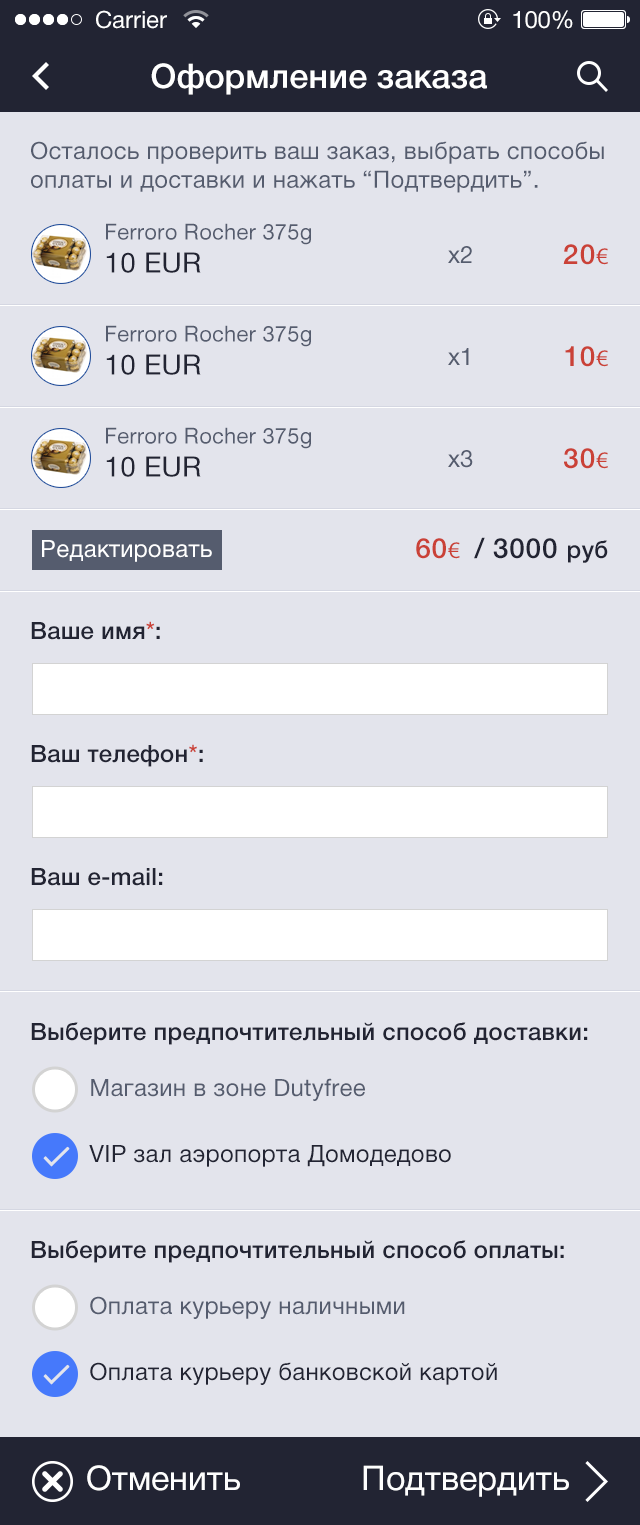
<style>
.page{position:relative;width:640px;height:1525px;background:#e3e4ec}
.page>*{position:absolute;margin:0}
.t1{font:24px "HelveticaNeueCyr-Roman";color:#ffffff}
.t2{font:34px "HelveticaNeueCyr-Medium";color:#ffffff}
.t3{font:24px "HelveticaNeueCyr-Roman";letter-spacing:0.01em;color:#555c6e}
.t4{font:22px "HelveticaNeueCyr-Roman";letter-spacing:0.01em;color:#555c6e}
.t5{font:28px/33px "HelveticaNeueCyr-Roman";letter-spacing:0.01em;color:#222433}
.t6{font:28px "HelveticaNeueCyr-Medium";letter-spacing:0.01em;color:#ca4137}
.t7{font:24px "MyriadPro-Regular";letter-spacing:0.01em;color:#ca4137}
.t8{font:24px "HelveticaNeueCyr-Roman";letter-spacing:0.01em;color:#ffffff}
.t9{font:28px "HelveticaNeueCyr-Medium";letter-spacing:0.01em;color:#222433}
.t10{font:24px "HelveticaNeueCyr-Medium";letter-spacing:0.01em;color:#222433}
.t11{font:24px "HelveticaNeueCyr-Medium";letter-spacing:0.01em;color:#ca4137}
.t12{font:24px "HelveticaNeueCyr-Roman";letter-spacing:0.01em;color:#222433}
.t13{font:34px "HelveticaNeueCyr-Roman";color:#fefefe}
</style>
<div class="page">
<p class="t1" style="left:96px;top:10px;width:71px;height:19px">Carrier</p>
<p class="t1" style="left:513px;top:10px;width:60px;height:19px">100%</p>
<p class="t2" style="left:151px;top:63px;width:336px;height:32px">Оформление заказа</p>
<p class="t3" style="left:31px;top:141px;width:573px;height:52px">Осталось проверить ваш заказ, выбрать способы оплаты и доставки и нажать “Подтвердить”.</p>
<p class="t4" style="left:106px;top:223px;width:205px;height:50px">Ferroro Rocher 375g<br><span class="t5">10 EUR</span></p>
<p class="t3" style="left:448px;top:246px;width:24px;height:17px">x2</p>
<p class="t6" style="left:563px;top:244px;width:45px;height:21px">20<span class="t7">€</span></p>
<p class="t4" style="left:106px;top:325px;width:205px;height:50px">Ferroro Rocher 375g<br><span class="t5">10 EUR</span></p>
<p class="t3" style="left:448px;top:348px;width:21px;height:17px">x1</p>
<p class="t6" style="left:565px;top:346px;width:43px;height:21px">10<span class="t7">€</span></p>
<p class="t4" style="left:106px;top:427px;width:205px;height:50px">Ferroro Rocher 375g<br><span class="t5">10 EUR</span></p>
<p class="t6" style="left:564px;top:448px;width:44px;height:21px">30<span class="t7">€</span></p>
<p class="t3" style="left:448px;top:450px;width:25px;height:18px">x3</p>
<p class="t8" style="left:42px;top:540px;width:170px;height:22px">Редактировать</p>
<p class="t9" style="left:416px;top:537px;width:192px;height:26px"><span class="t6">60</span><span class="t7">€  </span>/ 3000 <span class="t10">руб</span></p>
<p class="t10" style="left:31px;top:621px;width:129px;height:19px">Ваше имя<span class="t11">*</span>:</p>
<p class="t10" style="left:31px;top:744px;width:172px;height:23px">Ваш телефон<span class="t11">*</span>:</p>
<p class="t10" style="left:31px;top:868px;width:132px;height:18px">Ваш e-mail:</p>
<p class="t10" style="left:31px;top:1022px;width:557px;height:23px">Выберите предпочтительный способ доставки:</p>
<p class="t3" style="left:91px;top:1078px;width:274px;height:23px">Магазин в зоне Dutyfree</p>
<p class="t12" style="left:89px;top:1145px;width:362px;height:22px">VIP зал аэропорта Домодедово</p>
<p class="t10" style="left:31px;top:1240px;width:533px;height:23px">Выберите предпочтительный способ оплаты:</p>
<p class="t3" style="left:90px;top:1296px;width:315px;height:23px">Оплата курьеру наличными</p>
<p class="t12" style="left:90px;top:1362px;width:407px;height:23px">Оплата курьеру банковской картой</p>
<p class="t13" style="left:87px;top:1465px;width:153px;height:26px">Отменить</p>
<p class="t13" style="left:363px;top:1465px;width:206px;height:32px">Подтвердить</p>
</div>
